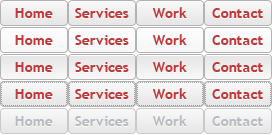
<style>
.page{position:relative;width:272px;height:135px}
.page>*{position:absolute;margin:0}
.t1{font:14.3px "TrebuchetMS-Bold";color:#bf3a3a}
.t2{font:14.3px "TrebuchetMS-Bold";color:#b8bbbf}
</style>
<div class="page">
<p class="t1" style="left:15px;top:8px;width:38px;height:10px">Home</p>
<p class="t1" style="left:75px;top:8px;width:54px;height:10px">Services</p>
<p class="t1" style="left:152px;top:7px;width:35px;height:11px">Work</p>
<p class="t1" style="left:212px;top:8px;width:51px;height:10px">Contact</p>
<p class="t1" style="left:15px;top:35px;width:38px;height:10px">Home</p>
<p class="t1" style="left:75px;top:35px;width:54px;height:10px">Services</p>
<p class="t1" style="left:152px;top:34px;width:35px;height:11px">Work</p>
<p class="t1" style="left:212px;top:35px;width:51px;height:10px">Contact</p>
<p class="t1" style="left:15px;top:62px;width:38px;height:10px">Home</p>
<p class="t1" style="left:75px;top:62px;width:54px;height:10px">Services</p>
<p class="t1" style="left:152px;top:61px;width:35px;height:11px">Work</p>
<p class="t1" style="left:212px;top:62px;width:51px;height:10px">Contact</p>
<p class="t1" style="left:15px;top:89px;width:38px;height:10px">Home</p>
<p class="t1" style="left:75px;top:89px;width:54px;height:10px">Services</p>
<p class="t1" style="left:152px;top:88px;width:35px;height:11px">Work</p>
<p class="t1" style="left:212px;top:89px;width:51px;height:10px">Contact</p>
<p class="t2" style="left:15px;top:116px;width:38px;height:10px">Home</p>
<p class="t2" style="left:75px;top:116px;width:54px;height:10px">Services</p>
<p class="t2" style="left:152px;top:115px;width:35px;height:11px">Work</p>
<p class="t2" style="left:212px;top:116px;width:51px;height:10px">Contact</p>
</div>
